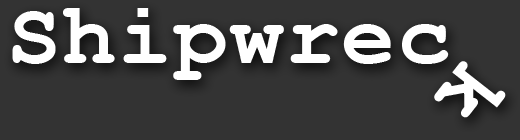
<style>
.page{position:relative;width:520px;height:140px;background:#333333}
.page>*{position:absolute;margin:0}
.t1{font:90px "CourierNewPS-BoldMT";letter-spacing:0.02em;color:#ffffff}
</style>
<div class="page">
<p class="t1" style="left:12px;top:8px;width:437px;height:72px">Shipwrec</p>
<p class="t1" style="left:434px;top:61px;width:72px;height:57px;rotate:128deg">k</p>
</div>
